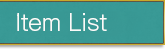
<style>
.page{position:relative;width:165px;height:49px}
.page>*{position:absolute;margin:0}
.t1{font:22px "GothicMB101Pro-Light";color:#fbfbf9}
</style>
<div class="page">
<p class="t1" style="left:17px;top:13px;width:90px;height:18px">Item List</p>
</div>
